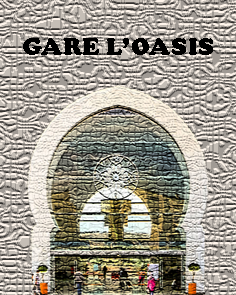
<style>
.page{position:relative;width:236px;height:295px}
.page>*{position:absolute;margin:0}
.t1{font:25px "CooperBlack";letter-spacing:0.025em;color:#000000}
</style>
<div class="page">
<p class="t1" style="left:23px;top:38px;width:190px;height:17px">GARE L’OASIS</p>
</div>
